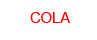
<style>
.page{position:relative;width:97px;height:40px;background:#ffffff}
.page>*{position:absolute;margin:0}
.t1{font:14.7px "ArialMT";color:#ff0000}
</style>
<div class="page">
<p class="t1" style="left:30px;top:12px;width:41px;height:11px">COLA</p>
</div>
